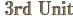
<style>
.page{position:relative;width:73px;height:19px;background:#ffffff}
.page>*{position:absolute;margin:0}
.t1{font:18px "RyuminPro-ExBold";letter-spacing:-0.04em;font-weight:bold}
.t2{font:18px "RyuminPro-ExBold";letter-spacing:-0.05em;font-weight:bold}
</style>
<div class="page">
<p class="t1" style="left:5px;top:1px;width:69px;height:15px"><span class="t2">3rd</span> Unit</p>
</div>
